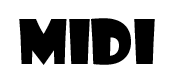
<style>
.page{position:relative;width:179px;height:73px;background:#ffffff}
.page>*{position:absolute;margin:0}
.t1{font:60px "ShowcardGothic-Reg";color:#000000}
</style>
<div class="page">
<p class="t1" style="left:19px;top:18px;width:136px;height:47px">MIDI</p>
</div>
